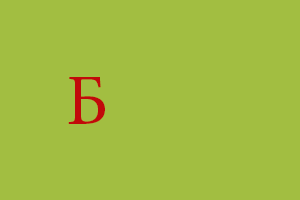
<style>
.page{position:relative;width:300px;height:200px;background:#a2be41}
.page>*{position:absolute;margin:0}
.t1{font:72px "MinionPro-Regular";color:#c10a0a}
</style>
<div class="page">
<p class="t1" style="left:68px;top:77px;width:37px;height:47px">Б</p>
</div>
